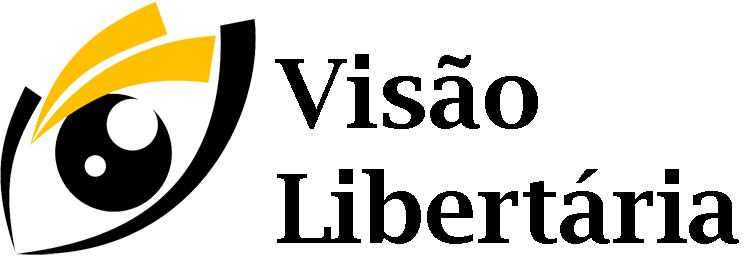
<style>
.page{position:relative;width:750px;height:256px;background:#ffffff}
.page>*{position:absolute;margin:0}
.t1{font:96px "LucidaBright-Demi";color:#000000}
</style>
<div class="page">
<p class="t1" style="left:275px;top:54px;width:464px;height:190px">Visão<br>Libertária</p>
</div>
